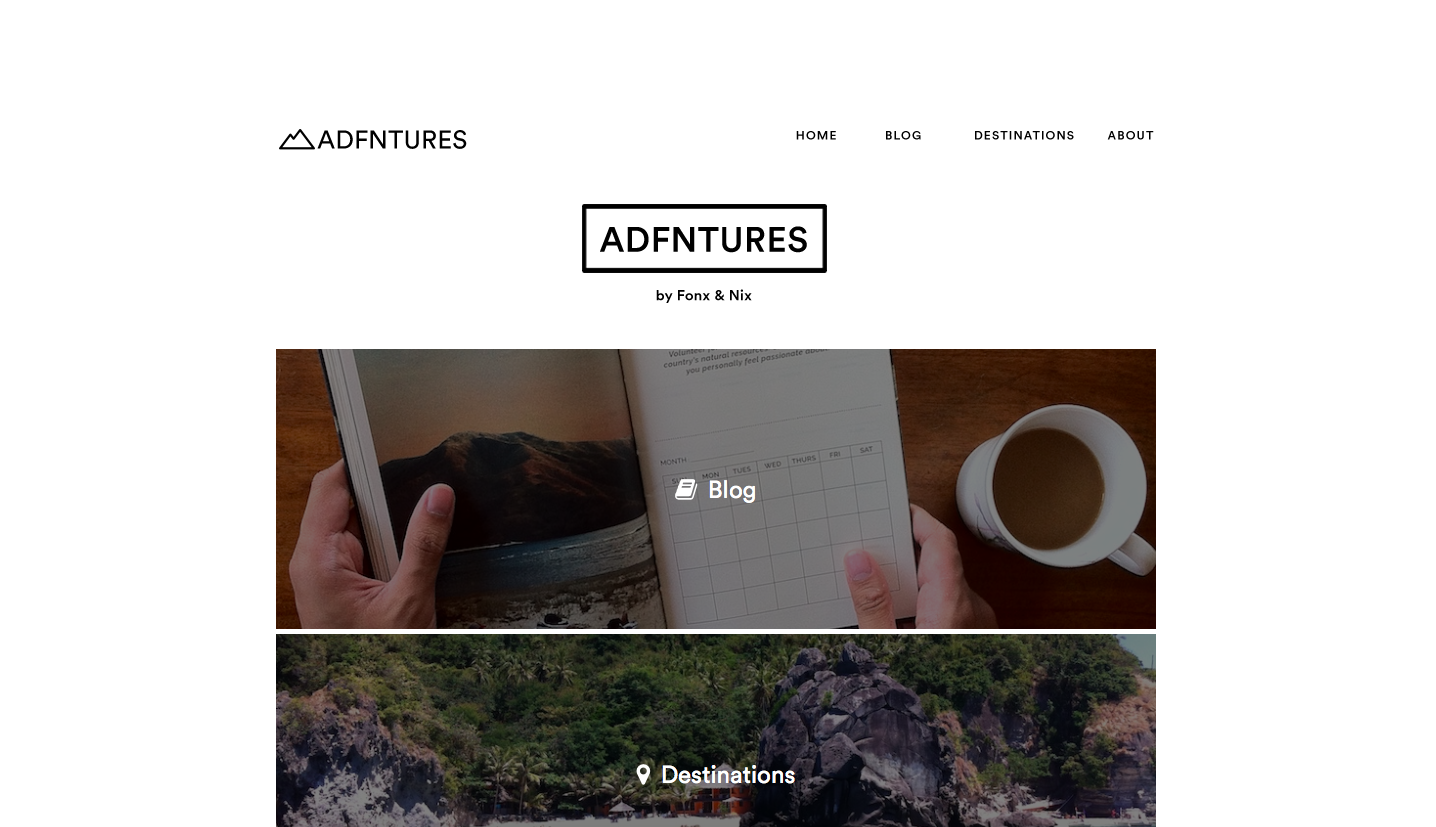
<style>
.page{position:relative;width:1436px;height:827px;background:#ffffff}
.page>*{position:absolute;margin:0}
.t1{font:25.5px "Circular-Book";letter-spacing:0.025em;color:#000000}
.t2{font:12px "Circular-Medium";letter-spacing:0.1em;color:#000000;text-transform:uppercase}
.t3{font:35px "Circular-Medium";letter-spacing:0.025em;color:#000000}
.t4{font:14.5px "Circular-Medium";letter-spacing:0.025em;color:#000000}
</style>
<div class="page">
<p class="t1" style="left:317px;top:130px;width:150px;height:19px">ADFNTURES</p>
<p class="t2" style="left:796px;top:131px;width:358px;height:9px">Home   Blog   Destinations  About</p>
<p class="t3" style="left:600px;top:226px;width:207px;height:27px">ADFNTURES</p>
<p class="t4" style="left:656px;top:289px;width:96px;height:14px">by Fonx &amp; Nix</p>
</div>
